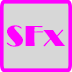
<style>
.page{position:relative;width:72px;height:72px;background:#d7d7d7}
.page>*{position:absolute;margin:0}
.t1{font:30px "Broadway";color:#ff00ff}
</style>
<div class="page">
<p class="t1" style="left:6px;top:25px;width:60px;height:22px">SFx</p>
</div>
